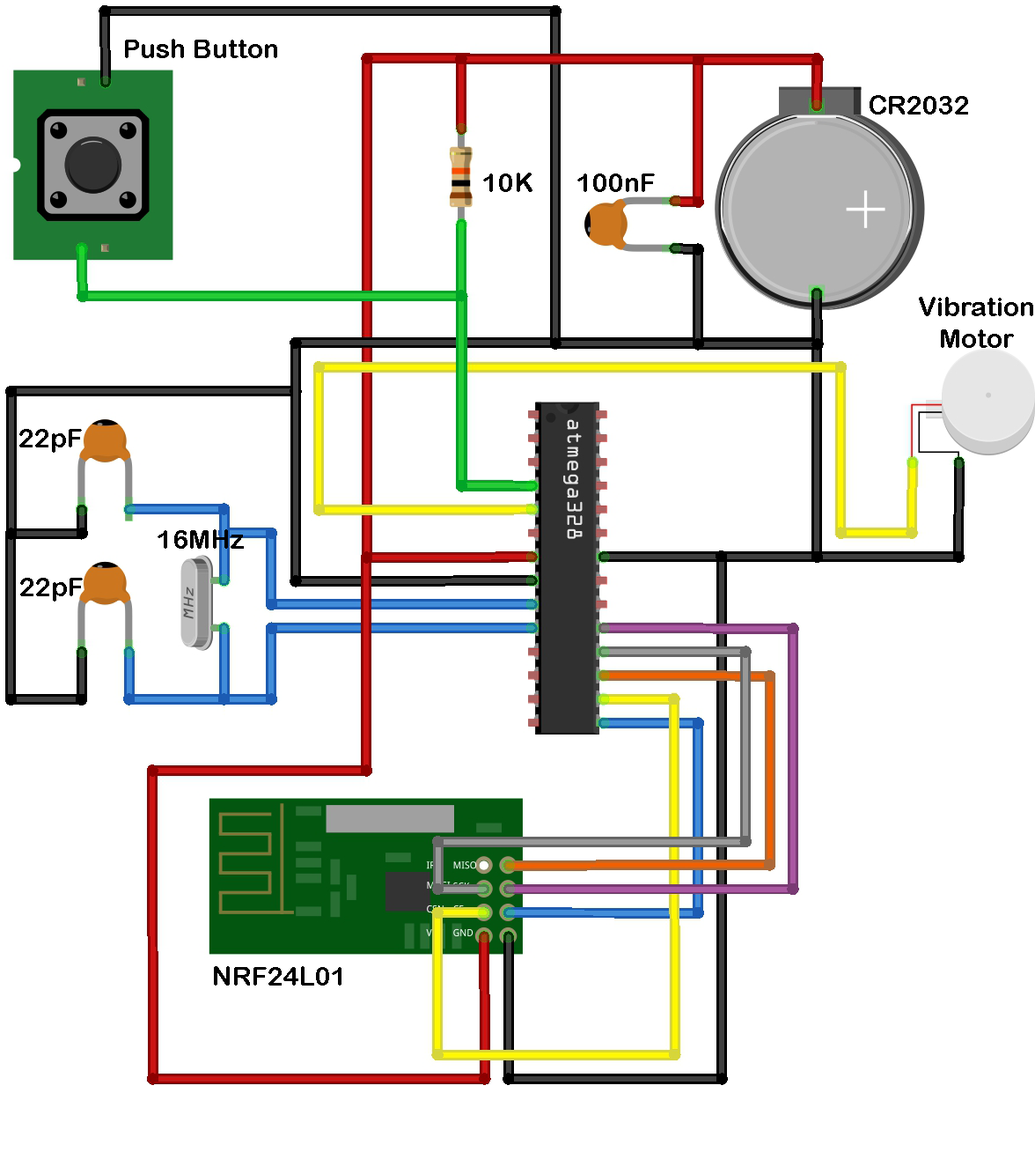
<style>
.page{position:relative;width:1035px;height:1152px;background:#ffffff}
.page>*{position:absolute;margin:0}
.t1{font:26.4px "ArialRoundedMTBold";color:#000000}
</style>
<div class="page">
<p class="t1" style="left:125px;top:39px;width:152px;height:19px">Push Button</p>
<p class="t1" style="left:870px;top:95px;width:99px;height:19px">CR2032</p>
<p class="t1" style="left:483px;top:173px;width:50px;height:19px">10K</p>
<p class="t1" style="left:578px;top:173px;width:77px;height:19px">100nF</p>
<p class="t1" style="left:919px;top:297px;width:115px;height:51px;text-align:center">Vibration<br>Motor</p>
<p class="t1" style="left:19px;top:429px;width:63px;height:24px">22pF</p>
<p class="t1" style="left:158px;top:529px;width:86px;height:20px">16MHz</p>
<p class="t1" style="left:20px;top:578px;width:63px;height:23px">22pF</p>
<p class="t1" style="left:214px;top:966px;width:128px;height:19px">NRF24L01</p>
</div>
